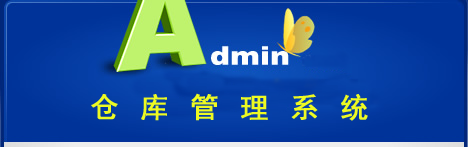
<style>
.page{position:relative;width:468px;height:147px}
.page>*{position:absolute;margin:0}
.t1{font:28px "SimHei";letter-spacing:0.76em;color:#edfa22;font-weight:bold}
</style>
<div class="page">
<p class="t1" style="left:91px;top:93px;width:277px;height:28px">仓库管理系统</p>
</div>
